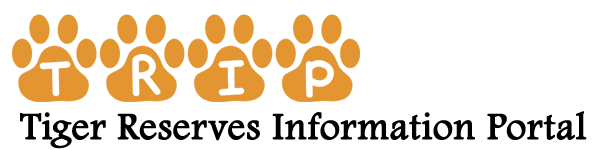
<style>
.page{position:relative;width:600px;height:150px;background:#ffffff}
.page>*{position:absolute;margin:0}
.t1{font:39px "FootlightMTLight";color:#000000;font-weight:bold}
</style>
<div class="page">
<p class="t1" style="left:20px;top:111px;width:567px;height:38px">Tiger Reserves Information Portal</p>
</div>
